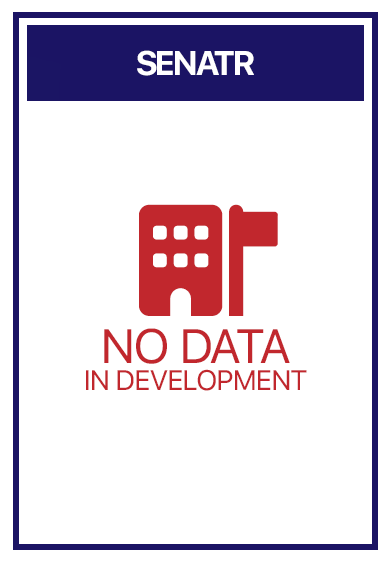
<style>
.page{position:relative;width:391px;height:562px;background:#ffffff}
.page>*{position:absolute;margin:0}
.t1{font:34px "SFProDisplay-Bold";letter-spacing:-0.05em;color:#ffffff;text-transform:uppercase}
.t2{font:28px/27px "SFUIText-Regular";letter-spacing:-0.05em;color:#c1272d;text-transform:uppercase}
.t3{font:48px/29px "SFUIText-Regular";letter-spacing:-0.05em;color:#c1272d;text-transform:uppercase}
</style>
<div class="page">
<p class="t1" style="left:137px;top:50px;width:117px;height:26px">senatr</p>
<p class="t2" style="left:86px;top:328px;width:221px;height:63px;text-align:center"><span class="t3">no data<br></span>in Development</p>
</div>
